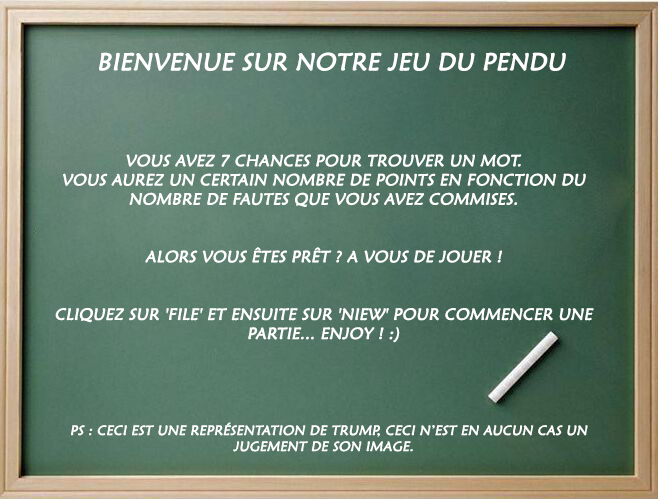
<style>
.page{position:relative;width:658px;height:499px}
.page>*{position:absolute;margin:0}
.t1{font:16px "MaiandraGD-Regular";color:#ffffff;text-transform:uppercase;font-weight:bold;font-style:italic}
.t2{font:24px "MaiandraGD-Regular";color:#ffffff;text-transform:uppercase;font-weight:bold;font-style:italic}
.t3{font:13.3px "MaiandraGD-Regular";color:#ffffff;text-transform:uppercase;font-weight:bold;font-style:italic}
</style>
<div class="page">
<p class="t1" style="left:55px;top:52px;width:539px;height:400px;text-align:center"><span class="t2">  Bienvenue sur notre jeu du pendu<br></span><br><br><br><br>Vous avez 7 chances pour trouver un mot.<br>Vous aurez un certain nombre de points en fonction du nombre de fautes que vous avez comMises.<br><br><br>Alors vous êtes prêt ? A vous de jouer !<br><br><br>Cliquez sur 'File' et ensuite sur 'Niew' pour commencer une partie... ENJOY ! :)<br><br><br><br><br>  <span class="t3">PS : Ceci est une représentation de Trump, ceci n’est en aucun cas un jugement de son image.</span></p>
</div>
